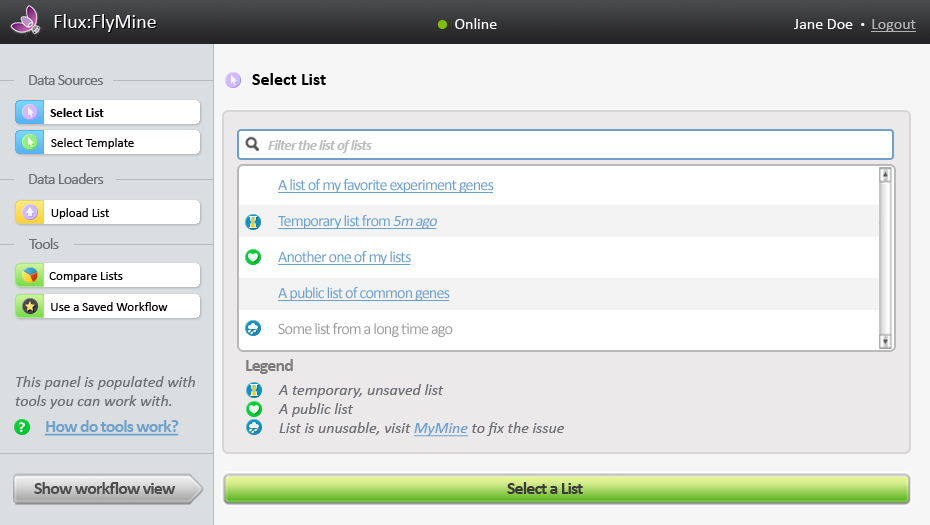
<style>
.page{position:relative;width:930px;height:525px;background:#ffffff}
.page>*{position:absolute;margin:0}
.t1{font:20px "Calibri";color:#f9f9f9}
.t2{font:16px "Calibri";color:#fafafa}
.t3{font:30px "Calibri";color:#81c000}
.t4{font:10px "Calibri";color:#fafafa}
.t5{font:16px "Calibri";color:#b3b3b3;text-decoration:underline}
.t6{font:16px "Calibri";letter-spacing:-0.05em;color:#6f7074}
.t7{font:18px "Calibri-Bold";color:#000000}
.t8{font:13px "Calibri-Bold";color:#000000}
.t9{font:13px "Calibri";color:#000000}
.t10{font:15px "Calibri-BoldItalic";letter-spacing:-0.05em;color:#bcbcbc}
.t11{font:16px/36px "Calibri";letter-spacing:-0.05em;color:#6fa0cb;text-decoration:underline}
.t12{font:16px/36px "Calibri";letter-spacing:-0.05em;color:#6fa0cb;font-style:italic;text-decoration:underline}
.t13{font:16px/36px "Calibri";letter-spacing:-0.05em;color:#9e9e9e}
.t14{font:18px "Calibri-Bold";letter-spacing:-0.05em;color:#7c7c7c}
.t15{font:16px "Calibri-Italic";color:#6f7074}
.t16{font:16px "Calibri-Italic";color:#6fa0cb;text-decoration:underline}
.t17{font:18px "Calibri-Bold";letter-spacing:-0.05em;color:#6fa0cb;text-decoration:underline}
.t18{font:18px "Calibri-Bold";letter-spacing:-0.05em;color:#4e4e4f}
.t19{font:18px "Calibri-Bold";letter-spacing:-0.05em;color:#3a3a3a}
</style>
<div class="page">
<p class="t1" style="left:54px;top:14px;width:102px;height:18px">Flux:FlyMine</p>
<p class="t2" style="left:437px;top:18px;width:60px;height:11px"><span class="t3">•  </span>Online</p>
<p class="t2" style="left:794px;top:19px;width:122px;height:13px">Jane Doe  <span class="t4">•  </span><span class="t5">Logout</span></p>
<p class="t6" style="left:29px;top:75px;width:74px;height:10px">Data Sources</p>
<p class="t7" style="left:252px;top:73px;width:74px;height:12px">Select List</p>
<p class="t8" style="left:50px;top:108px;width:54px;height:9px">Select List</p>
<p class="t9" style="left:51px;top:138px;width:83px;height:11px">Select Template</p>
<p class="t10" style="left:268px;top:140px;width:104px;height:13px">Filter the list of lists</p>
<p class="t6" style="left:29px;top:173px;width:75px;height:11px">Data Loaders</p>
<p class="t11" style="left:278px;top:179px;width:216px;height:158px">A list of my favorite experiment genes<br>Temporary list from <span class="t12">5m ago<br></span>Another one of my lists<br>A public list of common genes<br><span class="t13">Some list from a long time ago</span></p>
<p class="t9" style="left:51px;top:208px;width:59px;height:11px">Upload List</p>
<p class="t6" style="left:29px;top:238px;width:30px;height:11px">Tools</p>
<p class="t9" style="left:49px;top:272px;width:74px;height:10px">Compare Lists</p>
<p class="t9" style="left:51px;top:302px;width:117px;height:9px">Use a Saved Workflow</p>
<p class="t14" style="left:246px;top:359px;width:47px;height:15px">Legend</p>
<p class="t15" style="left:15px;top:376px;width:180px;height:33px">This panel is populated with<br>tools you can work with.</p>
<p class="t15" style="left:278px;top:384px;width:287px;height:53px">A temporary, unsaved list<br>A public list<br>List is unusable, visit <span class="t16">MyMine</span> to fix the issue</p>
<p class="t17" style="left:45px;top:420px;width:134px;height:16px">How do tools work?</p>
<p class="t18" style="left:34px;top:482px;width:142px;height:12px">Show workflow view</p>
<p class="t19" style="left:507px;top:482px;width:76px;height:12px">Select a List</p>
</div>
